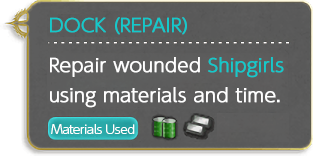
<style>
.page{position:relative;width:313px;height:156px}
.page>*{position:absolute;margin:0}
.t1{font:18px/30px "UDShinGoPro-Light";color:#ffffff;font-weight:bold}
.t2{font:18px/40px "UDShinGoPro-Light";color:#14c9cb;font-weight:bold}
.t3{font:18px/40px "UDShinGoPro-Light";color:#ffffff;font-weight:bold}
.t4{font:12px "UDShinGoPro-Light";letter-spacing:-0.04em;color:#ffffff}
</style>
<div class="page">
<p class="t1" style="left:50px;top:17px;width:234px;height:91px"><span class="t2">DOCK (REPAIR)<br></span><span class="t3">Repair wounded </span><span class="t2">Shipgirls<br></span>using materials and time.</p>
<p class="t4" style="left:51px;top:124px;width:84px;height:10px">Materials Used</p>
</div>
